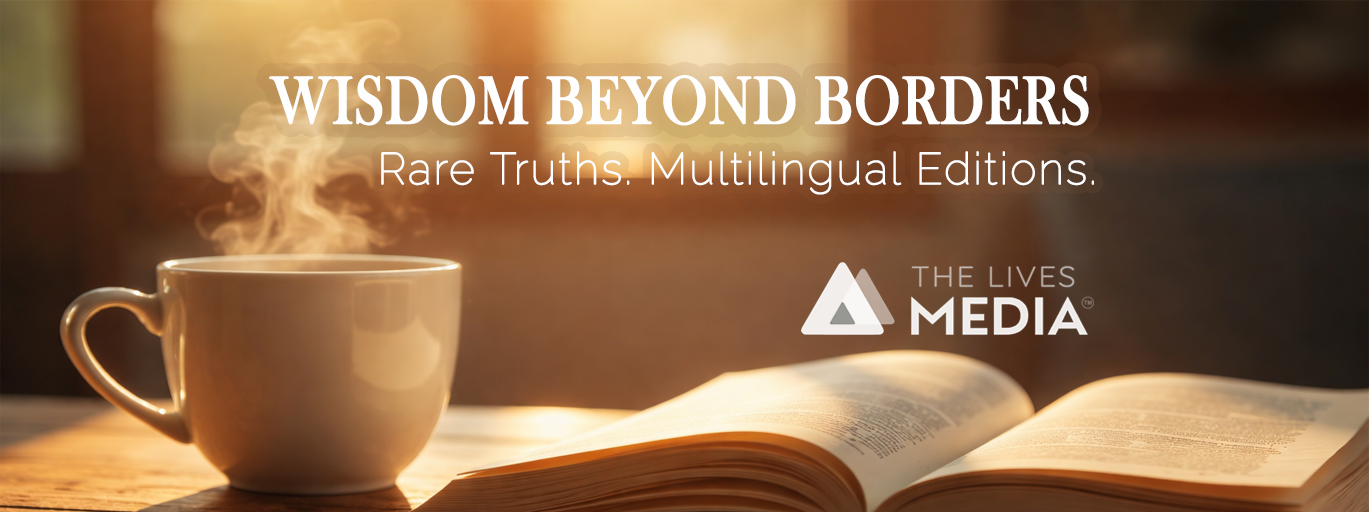
<style>
.page{position:relative;width:1369px;height:512px}
.page>*{position:absolute;margin:0}
.t1{font:69.3px "BaskOldFace";color:#fefefe;font-weight:bold;scale:0.82 1}
.t2{font:44px "Raleway-Thin";letter-spacing:0.03em;color:#fefefe;font-weight:bold}
</style>
<div class="page">
<p class="t1" style="left:269px;top:75px;width:820px;height:51px">WISDOM BEYOND BORDERS</p>
<p class="t2" style="left:381px;top:151px;width:713px;height:44px">Rare Truths. Multilingual Editions.</p>
</div>
